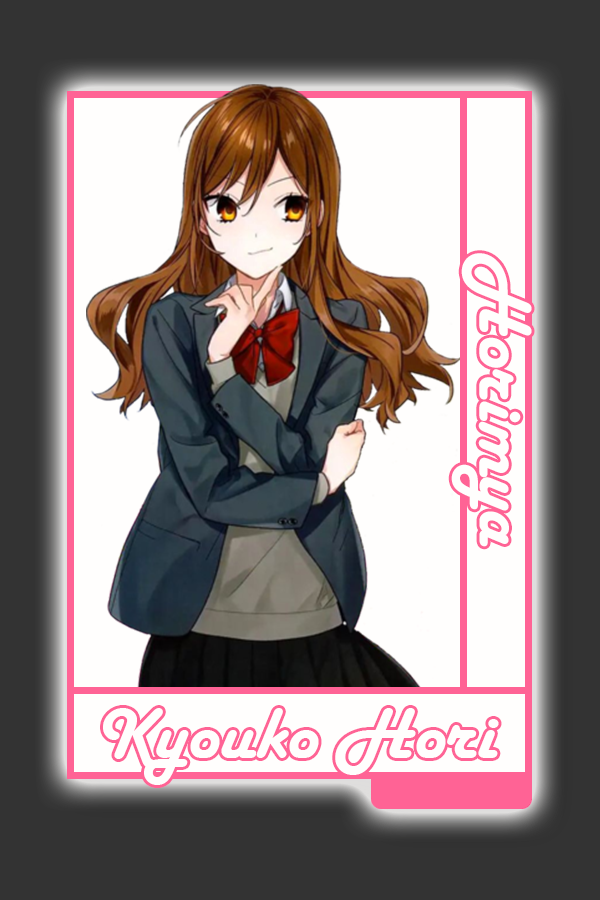
<style>
.page{position:relative;width:600px;height:900px;background:#fffefd}
.page>*{position:absolute;margin:0}
.t1{font:77.5px "HarlowSolid";color:#fffefd}
.t2{font:75px "HarlowSolid";color:#fffefd}
</style>
<div class="page">
<p class="t1" style="left:451px;top:253px;width:81px;height:294px;rotate:90deg">Horimya</p>
<p class="t2" style="left:103px;top:708px;width:396px;height:77px">Kyouko Hori</p>
</div>
